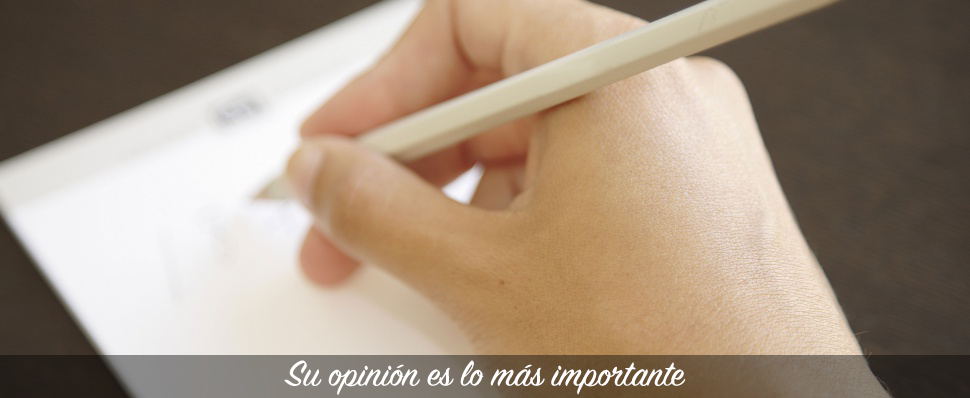
<style>
.page{position:relative;width:970px;height:398px}
.page>*{position:absolute;margin:0}
.t1{font:40px "SignPainter-HouseScript";color:#ffffff}
</style>
<div class="page">
<p class="t1" style="left:284px;top:360px;width:402px;height:35px">Su opinión es lo más importante</p>
</div>
